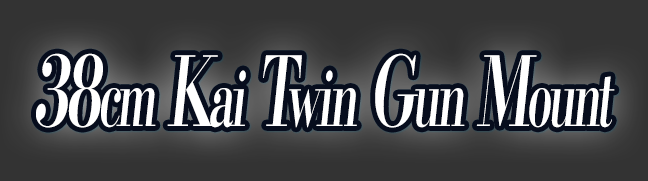
<style>
.page{position:relative;width:648px;height:181px;background:#333333}
.page>*{position:absolute;margin:0}
.t1{font:76.8px "KochoStd-Heavy";letter-spacing:-0.08em;color:#ffffff;font-style:italic;scale:0.6 1}
.t2{font:96px "KochoStd-Heavy";letter-spacing:-0.08em;color:#ffffff;font-style:italic;scale:0.6 1}
</style>
<div class="page">
<p class="t1" style="left:36px;top:53px;width:579px;height:75px"><span class="t2">38</span>cm<span class="t2"> K</span>ai<span class="t2"> T</span>win<span class="t2"> G</span>un<span class="t2"> M</span>ount</p>
</div>
